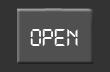
<style>
.page{position:relative;width:110px;height:72px;background:#333333}
.page>*{position:absolute;margin:0}
.t1{font:26px "DS-Digital";letter-spacing:-0.025em;color:#ffffff}
</style>
<div class="page">
<p class="t1" style="left:30px;top:29px;width:48px;height:17px">open</p>
</div>
